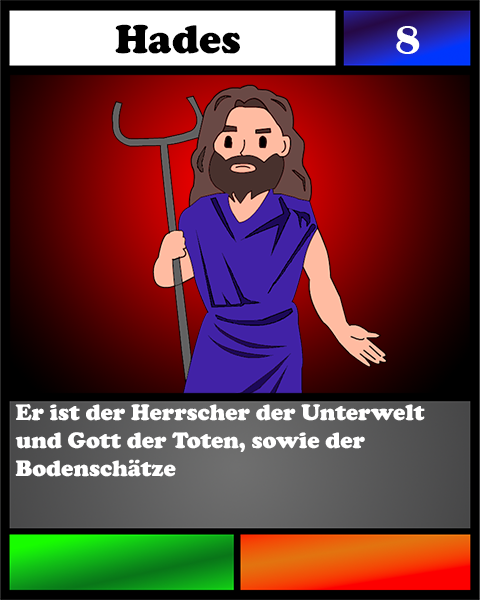
<style>
.page{position:relative;width:480px;height:600px}
.page>*{position:absolute;margin:0}
.t1{font:41.7px "CooperBlack";color:#000000}
.t2{font:41.7px "BritannicBold";color:#ffffff}
.t3{font:23.1px "CooperBlack";color:#ffffff}
</style>
<div class="page">
<p class="t1" style="left:115px;top:24px;width:125px;height:30px">Hades</p>
<p class="t2" style="left:396px;top:26px;width:24px;height:28px">8</p>
<p class="t3" style="left:15px;top:404px;width:410px;height:73px">Er ist der Herrscher der Unterwelt und Gott der Toten, sowie der Bodenschätze</p>
</div>
